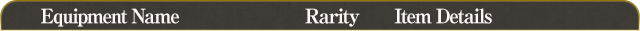
<style>
.page{position:relative;width:640px;height:31px;background:#3e3a35}
.page>*{position:absolute;margin:0}
.t1{font:20px "RyuminPro-ExBold";letter-spacing:-0.08em;color:#fef9f8}
</style>
<div class="page">
<p class="t1" style="left:41px;top:8px;width:451px;height:19px">Equipment Name                         Rarity       Item Details</p>
</div>
